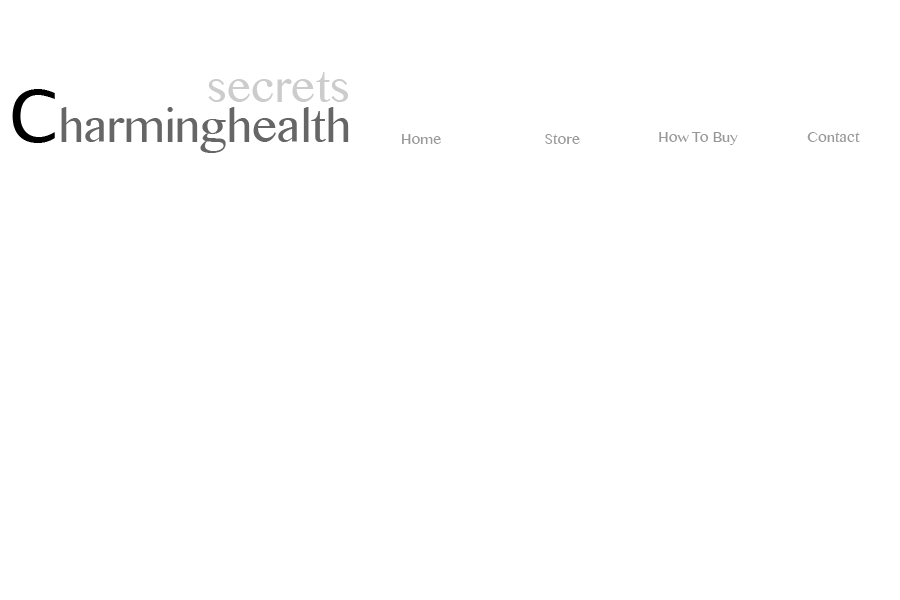
<style>
.page{position:relative;width:900px;height:600px;background:#ffffff}
.page>*{position:absolute;margin:0}
.t1{font:60px "SinhalaMN";color:#cccccc}
.t2{font:63px "SinhalaMN";color:#666666}
.t3{font:72px "LucidaGrande";color:#000000}
.t4{font:20px "SinhalaMN";color:#999999}
</style>
<div class="page">
<p class="t1" style="left:208px;top:72px;width:140px;height:30px">secrets</p>
<p class="t2" style="left:12px;top:89px;width:337px;height:64px"><span class="t3">C</span>harminghealth</p>
<p class="t4" style="left:402px;top:134px;width:39px;height:10px">Home</p>
<p class="t4" style="left:545px;top:134px;width:35px;height:10px">Store</p>
<p class="t4" style="left:659px;top:132px;width:79px;height:13px">How To Buy</p>
<p class="t4" style="left:807px;top:132px;width:53px;height:10px">Contact</p>
</div>
